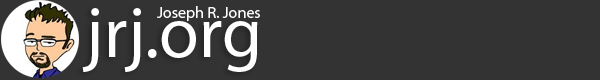
<style>
.page{position:relative;width:600px;height:80px;background:#333333}
.page>*{position:absolute;margin:0}
.t1{font:16px "MyriadPro-Regular";color:#ffffff}
.t2{font:72px "MyriadPro-Regular";color:#ffffff}
</style>
<div class="page">
<p class="t1" style="left:157px;top:6px;width:103px;height:15px">Joseph R. Jones</p>
<p class="t2" style="left:82px;top:8px;width:176px;height:64px">jrj.org</p>
</div>
